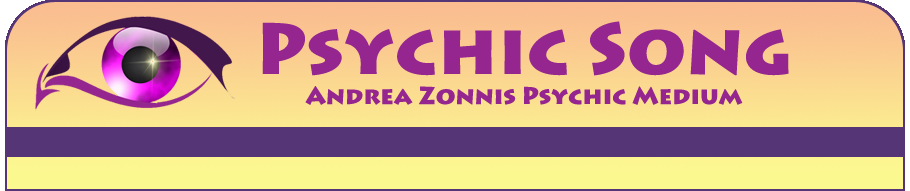
<style>
.page{position:relative;width:910px;height:191px}
.page>*{position:absolute;margin:0}
.t1{font:24px/30px "LithosPro-Black";color:#95268f}
.t2{font:24px "CenturyGothic-Italic";color:#95268f}
.t3{font:72px/30px "LithosPro-Black";color:#95268f}
</style>
<div class="page">
<p class="t1" style="left:262px;top:21px;width:527px;height:84px;text-align:center"><span class="t2"><br></span><span class="t3">Psychic Song<br></span>Andrea Zonnis Psychic Medium</p>
</div>
